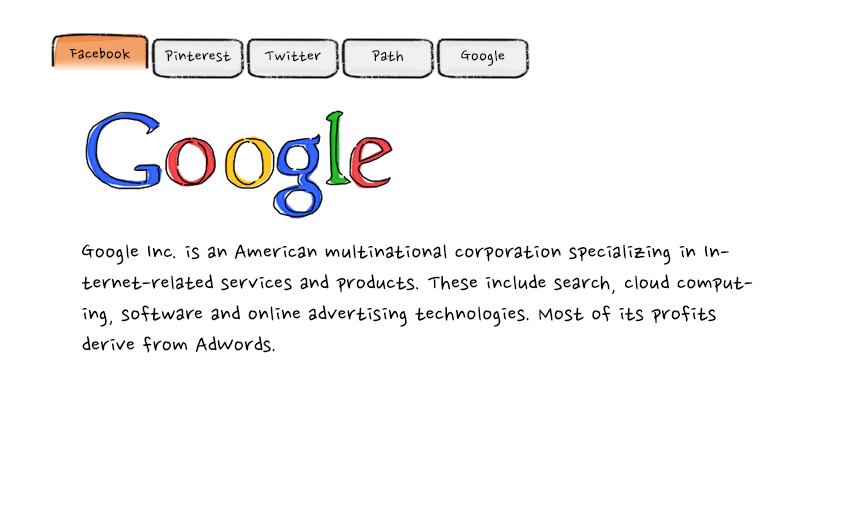
<style>
.page{position:relative;width:868px;height:520px;background:#ffffff}
.page>*{position:absolute;margin:0}
.t1{font:20px "NanumPen";color:#000000}
.t2{font:26px "NanumPen";color:#000000}
</style>
<div class="page">
<p class="t1" style="left:69px;top:47px;width:61px;height:13px">Facebook</p>
<p class="t1" style="left:165px;top:50px;width:66px;height:12px">Pinterest</p>
<p class="t1" style="left:264px;top:51px;width:58px;height:11px">Twitter</p>
<p class="t1" style="left:372px;top:50px;width:32px;height:12px">Path</p>
<p class="t1" style="left:461px;top:50px;width:44px;height:16px">Google</p>
<p class="t2" style="left:81px;top:244px;width:672px;height:109px">Google Inc. is an American multinational corporation specializing in Internet-related services and products. These include search, cloud computing, software and online advertising technologies. Most of its profits derive from AdWords.</p>
</div>
